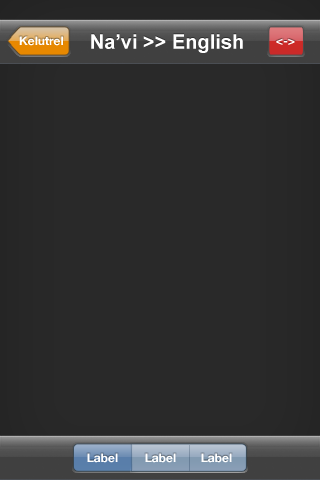
<style>
.page{position:relative;width:320px;height:480px;background:#292929}
.page>*{position:absolute;margin:0}
.t1{font:12px "HelveticaNeue-Bold";color:#ffffff}
.t2{font:20px "Arial-BoldMT";color:#ffffff}
</style>
<div class="page">
<p class="t1" style="left:19px;top:36px;width:44px;height:10px">Kelutrel</p>
<p class="t2" style="left:91px;top:34px;width:152px;height:19px">Na’vi &gt;&gt; English</p>
<p class="t1" style="left:276px;top:38px;width:19px;height:7px">&lt;-&gt;</p>
<p class="t1" style="left:87px;top:453px;width:31px;height:10px">Label</p>
<p class="t1" style="left:145px;top:453px;width:31px;height:10px">Label</p>
<p class="t1" style="left:201px;top:453px;width:31px;height:10px">Label</p>
</div>
